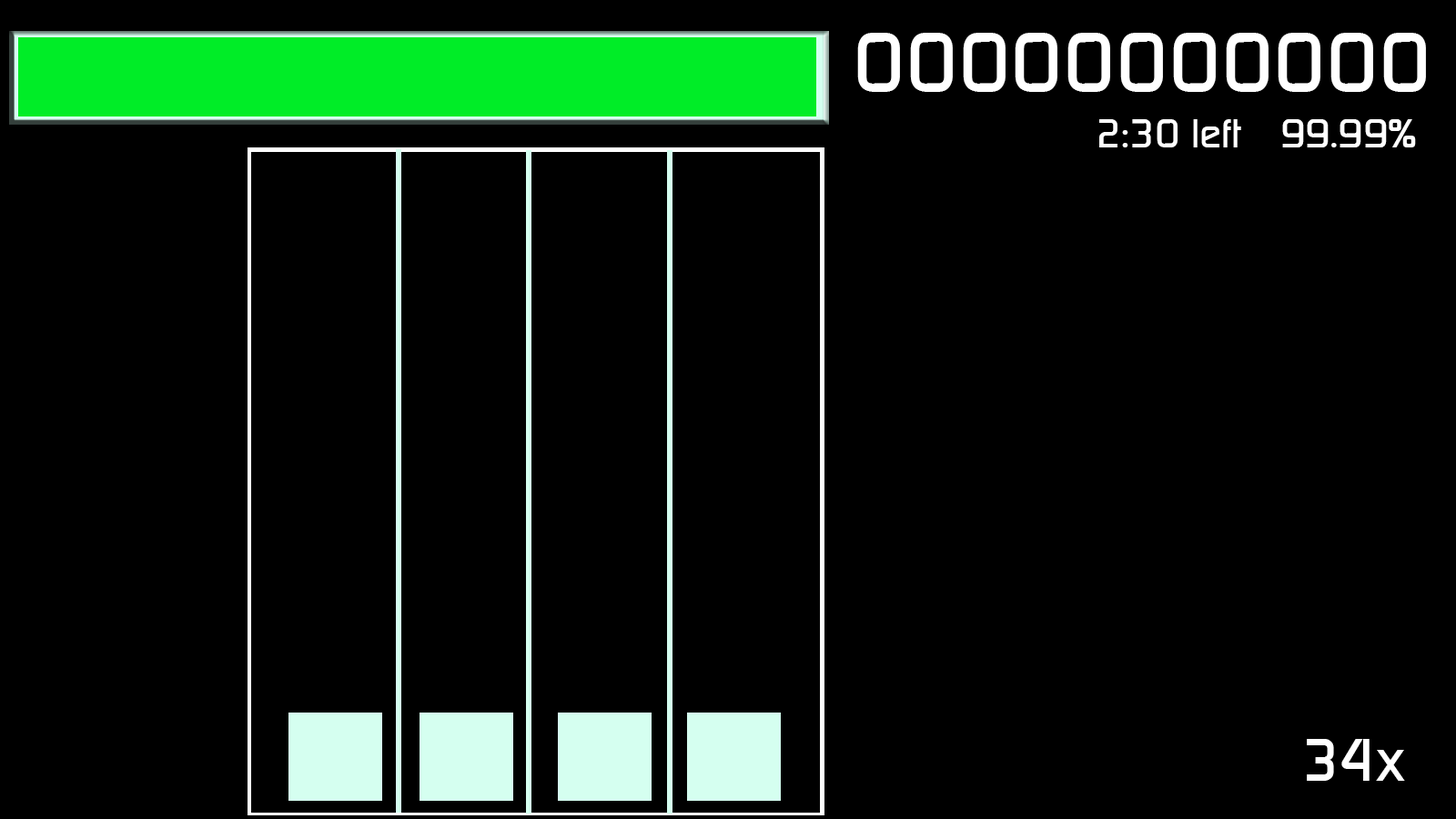
<style>
.page{position:relative;width:1456px;height:819px;background:#000000}
.page>*{position:absolute;margin:0}
.t1{font:81px "PrisonerSF";color:#ffffff}
.t2{font:39.1px "PrisonerSF";color:#ffffff}
.t3{font:57.3px "PrisonerSF";color:#ffffff}
</style>
<div class="page">
<p class="t1" style="left:857px;top:33px;width:569px;height:59px">00000000000</p>
<p class="t2" style="left:1099px;top:119px;width:142px;height:28px">2:30 left</p>
<p class="t2" style="left:1282px;top:119px;width:134px;height:28px">99.99%</p>
<p class="t3" style="left:1307px;top:739px;width:98px;height:42px">34x</p>
</div>
